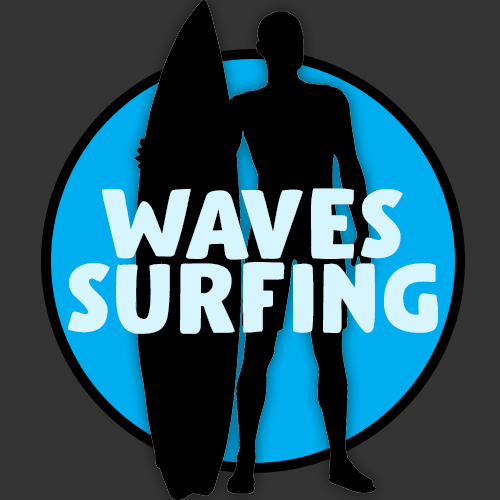
<style>
.page{position:relative;width:500px;height:500px;background:#333333}
.page>*{position:absolute;margin:0}
.t1{font:100px/74px "GumboDEMO-Regular";letter-spacing:0.04em;color:#d7f5fe}
</style>
<div class="page">
<p class="t1" style="left:68px;top:188px;width:370px;height:146px;text-align:center">WAVES<br>SURFING</p>
</div>
